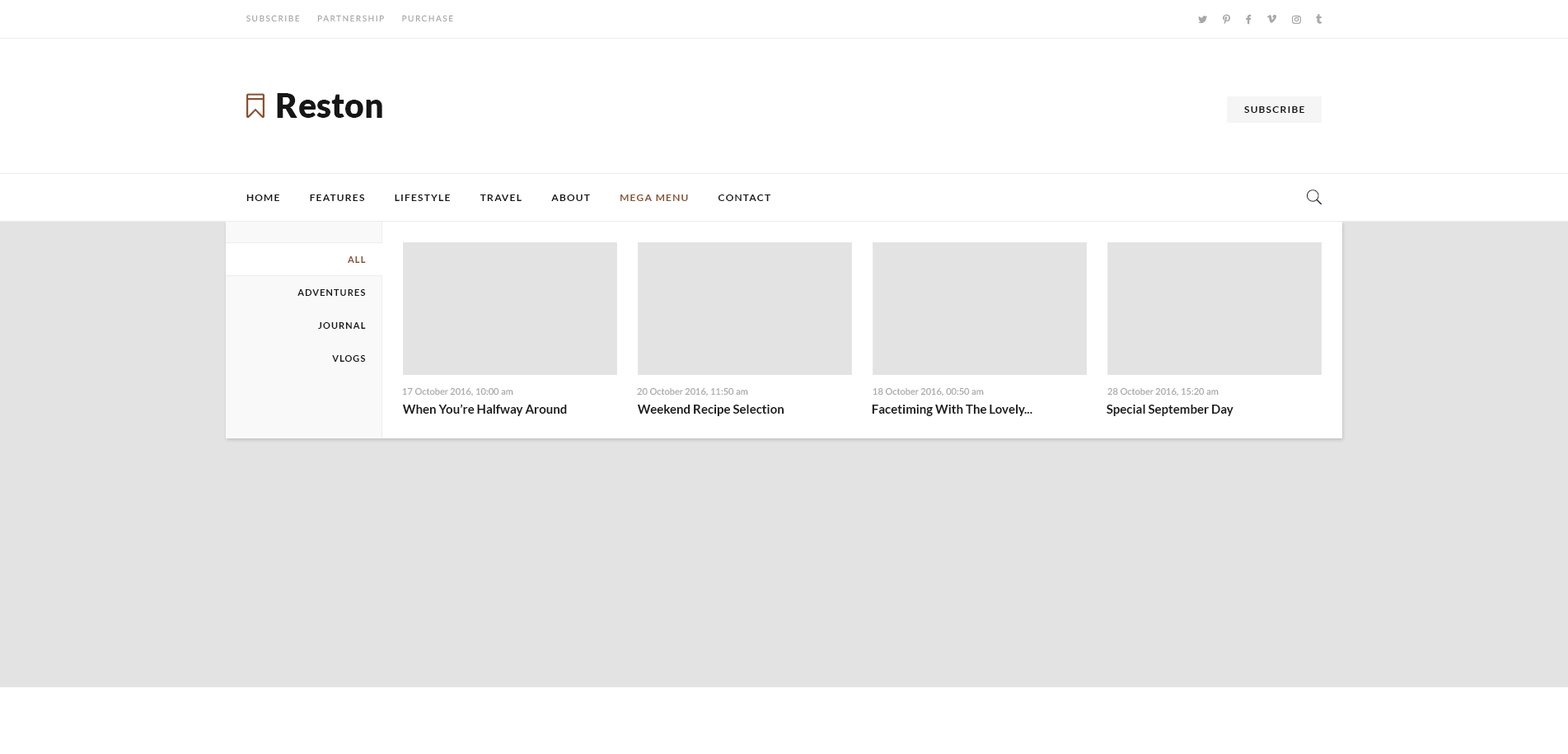
<style>
.page{position:relative;width:1568px;height:754px;background:#e3e3e3}
.page>*{position:absolute;margin:0}
.t1{font:8.2px "Lato-Medium";letter-spacing:0.15em;color:#a8a8a8;text-transform:uppercase}
.t2{font:33.8px "Lato-Black";color:#161616}
.t3{font:9.9px "Lato-Bold";letter-spacing:0.1em;color:#171717;text-transform:uppercase}
.t4{font:9.9px "Lato-Bold";letter-spacing:0.1em;color:#8a512f;text-transform:uppercase}
.t5{font:9.1px/33px "Lato-Bold";letter-spacing:0.1em;color:#171717;text-transform:uppercase}
.t6{font:9.1px/33px "Lato-Bold";letter-spacing:0.1em;color:#8a512f;text-transform:uppercase}
.t7{font:9.1px "Lato-Medium";color:#a8a8a8}
.t8{font:12.4px "Lato-Bold";color:#1a1a1a}
</style>
<div class="page">
<p class="t1" style="left:246px;top:15px;width:207px;height:7px">Subscribe     partnership     Purchase</p>
<p class="t2" style="left:277px;top:93px;width:105px;height:25px">Reston</p>
<p class="t3" style="left:1244px;top:106px;width:60px;height:7px">Subscribe</p>
<p class="t3" style="left:246px;top:194px;width:525px;height:7px">Home          Features          Lifestyle          Travel          About          <span class="t4">Mega Menu</span>          Contact</p>
<p class="t5" style="left:297px;top:256px;width:69px;height:106px;text-align:right"><span class="t6">All<br></span>Adventures<br>journal<br>vlogs</p>
<p class="t7" style="left:402px;top:387px;width:111px;height:9px">17 October 2016, 10:00 am</p>
<p class="t7" style="left:637px;top:387px;width:111px;height:9px">20 October 2016, 11:50 am</p>
<p class="t7" style="left:873px;top:387px;width:111px;height:9px">18 October 2016, 00:50 am</p>
<p class="t7" style="left:1107px;top:387px;width:112px;height:9px">28 October 2016, 15:20 am</p>
<p class="t8" style="left:402px;top:404px;width:165px;height:12px">When You’re Halfway Around</p>
<p class="t8" style="left:637px;top:405px;width:147px;height:11px">Weekend Recipe Selection</p>
<p class="t8" style="left:872px;top:405px;width:160px;height:11px">Facetiming With The Lovely...</p>
<p class="t8" style="left:1107px;top:405px;width:126px;height:11px">Special September Day</p>
</div>
